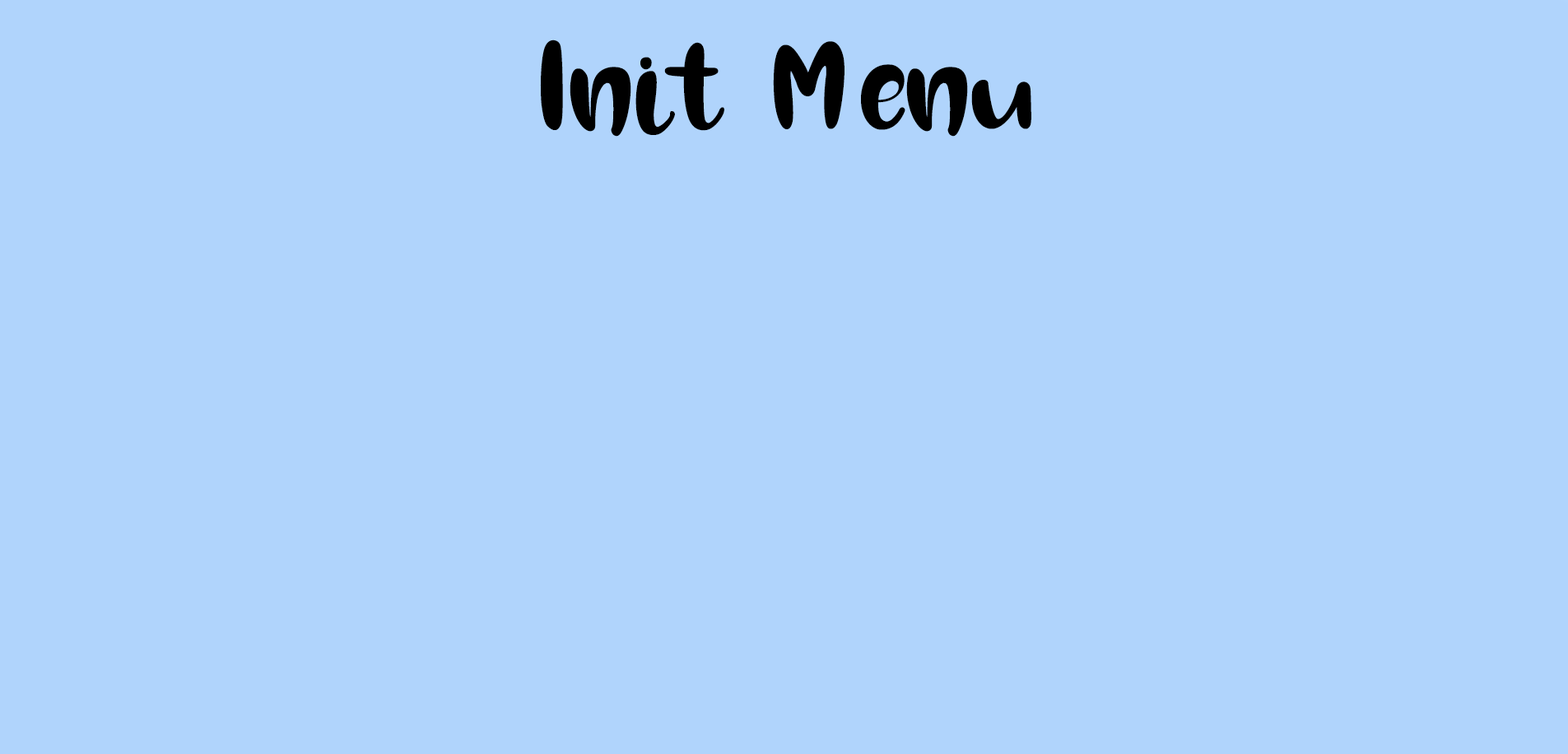
<style>
.page{position:relative;width:1568px;height:754px;background:#b0d4fc}
.page>*{position:absolute;margin:0}
.t1{font:164.6px "ChocolateRegular";color:#000000}
</style>
<div class="page">
<p class="t1" style="left:540px;top:40px;width:491px;height:97px">Init Menu</p>
</div>
